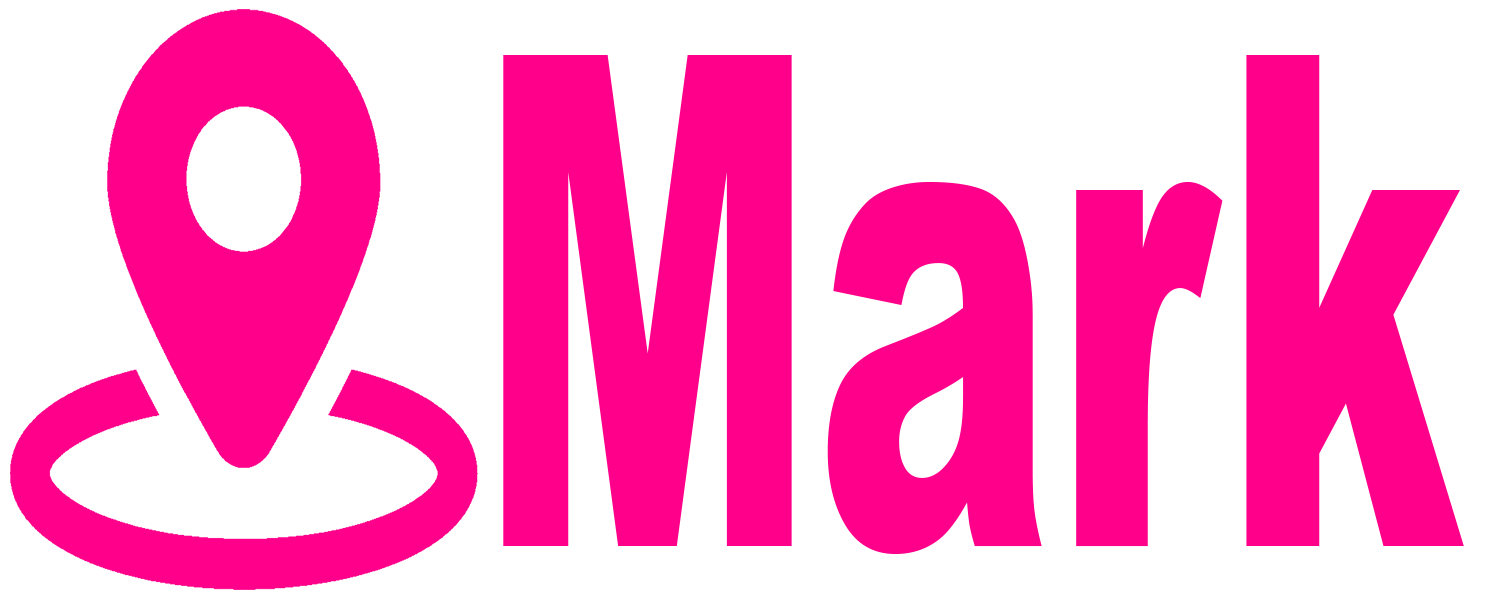
<style>
.page{position:relative;width:1500px;height:600px;background:#ffffff}
.page>*{position:absolute;margin:0}
.t1{font:686.1px "Arial-Black";color:#fe008a;scale:0.52 1}
</style>
<div class="page">
<p class="t1" style="left:503px;top:55px;width:961px;height:499px">Mark</p>
</div>
